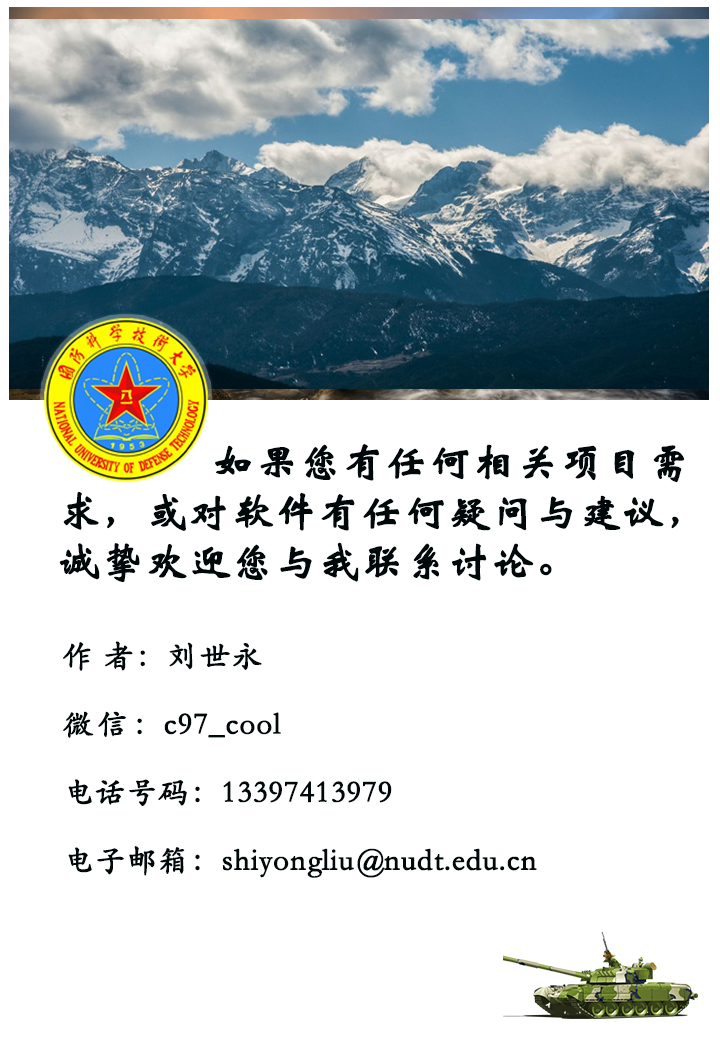
<style>
.page{position:relative;width:720px;height:1041px;background:#ffffff}
.page>*{position:absolute;margin:0}
.t1{font:41.7px/50px "STXinwei";letter-spacing:0.015em;color:#000809;font-weight:bold}
.t2{font:30.6px/68.1px "STKaiti";letter-spacing:0.015em;color:#000809;font-weight:bold}
.t3{font:30.6px/68.1px "STKaiti";letter-spacing:0.11em;color:#000809;font-weight:bold}
</style>
<div class="page">
<p class="t1" style="left:59px;top:444px;width:626px;height:139px">如果您有任何相关项目需<br>求，或对软件有任何疑问与建议，<br>诚挚欢迎您与我联系讨论。</p>
<p class="t2" style="left:62px;top:641px;width:475px;height:237px">作 者：刘世永<br><span class="t3">微信</span>：c97_cool<br>电话号码：13397413979<br>电子邮箱：shiyongliu@nudt.edu.cn</p>
</div>
